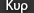
<style>
.page{position:relative;width:34px;height:13px}
.page>*{position:absolute;margin:0}
.t1{font:13.9px "MyriadPro-Regular";color:#ffffff}
</style>
<div class="page">
<p class="t1" style="left:6px;top:0px;width:22px;height:13px">Κυρ</p>
</div>
